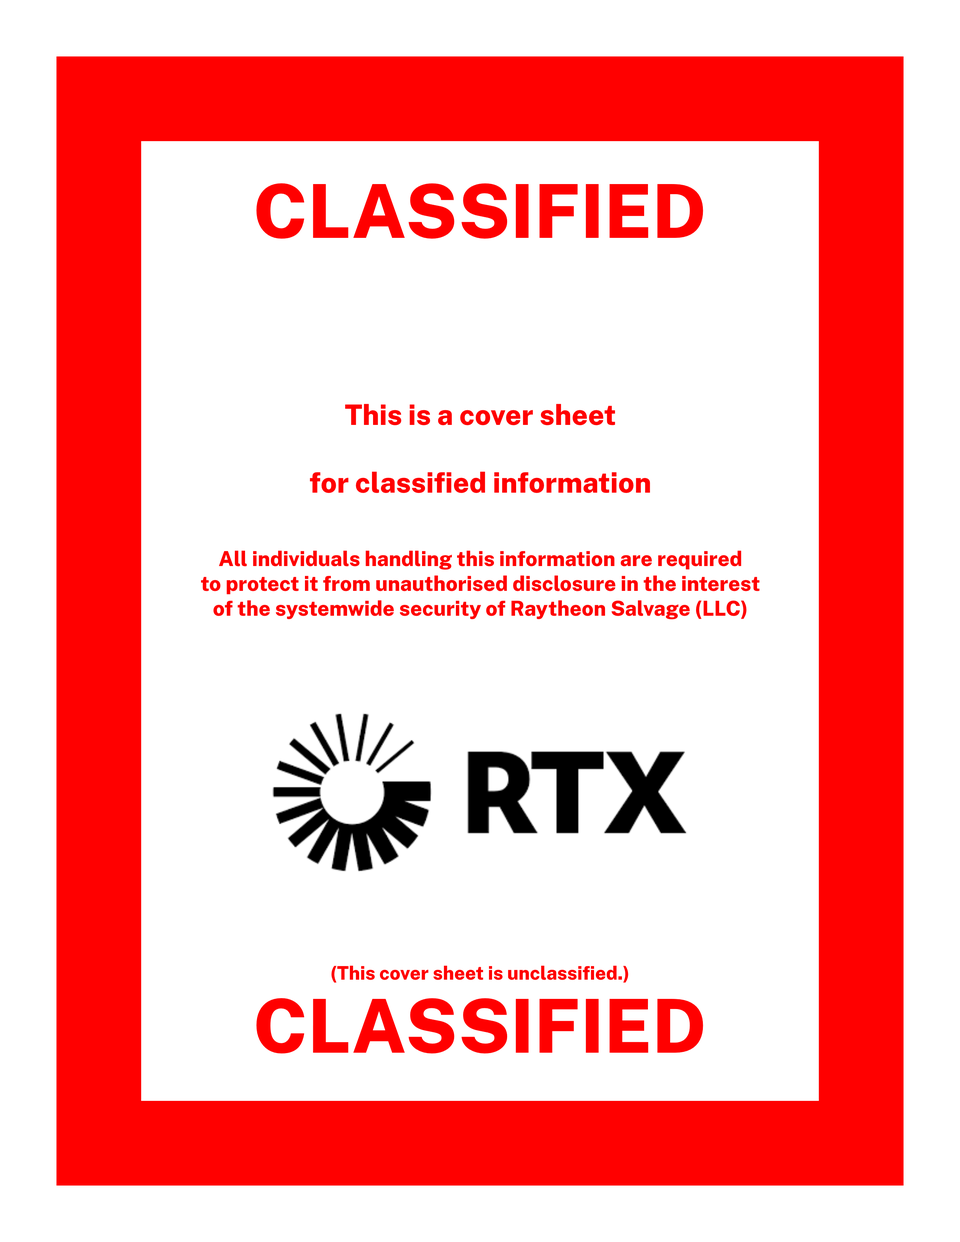
<style>
.page{position:relative;width:960px;height:1242px;background:#ffffff}
.page>*{position:absolute;margin:0}
.t1{font:28.2px "PublicSans-ExtraBold";color:#ff0000}
.t2{font:20.7px "PublicSans-ExtraBold";color:#ff0000}
.t3{font:18.8px "PublicSans-ExtraBold";color:#ff0000}
.t4{font:74.4px "PublicSans-ExtraBold";color:#ff0000}
</style>
<div class="page">
<p class="t1" style="left:310px;top:404px;width:340px;height:89px;text-align:center">This is a cover sheet<br><br>for classified information</p>
<p class="t2" style="left:201px;top:551px;width:559px;height:69px;text-align:center">All individuals handling this information are required<br>to protect it from unauthorised disclosure in the interest<br>of the systemwide security of Raytheon Salvage (LLC)</p>
<p class="t3" style="left:331px;top:966px;width:297px;height:17px">(This cover sheet is unclassified.)</p>
<p class="t4" style="left:256px;top:998px;width:447px;height:56px">CLASSIFIED</p>
</div>
